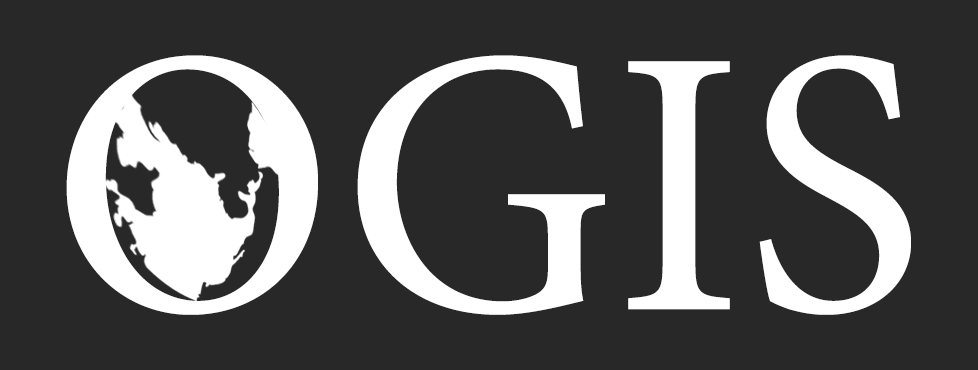
<style>
.page{position:relative;width:978px;height:370px;background:#282828}
.page>*{position:absolute;margin:0}
.t1{font:381.2px "MinionPro-Regular";color:#ffffff}
</style>
<div class="page">
<p class="t1" style="left:66px;top:55px;width:845px;height:260px">OGIS</p>
</div>
